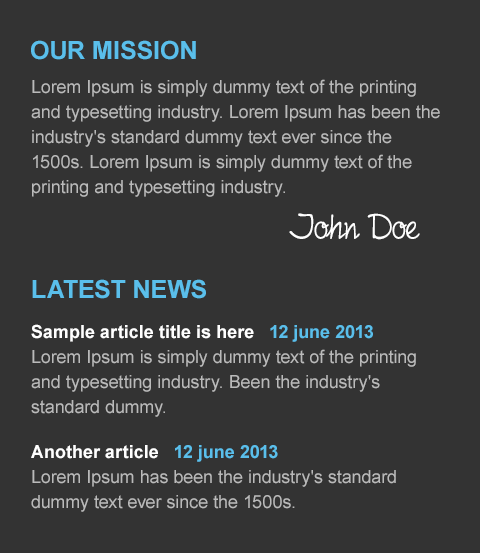
<style>
.page{position:relative;width:480px;height:553px;background:#333333}
.page>*{position:absolute;margin:0}
.t1{font:25px "Arial-BoldMT";color:#5abfeb;text-transform:uppercase}
.t2{font:18px/25px "ArialMT";color:#bababa}
.t3{font:40px "FinelinerScript";color:#ffffff}
.t4{font:18px/20px "Arial-BoldMT";color:#ffffff}
.t5{font:18px/20px "Arial-BoldMT";color:#5abfeb}
.t6{font:18px/25px "Arial-BoldMT";color:#5abfeb}
.t7{font:18px/20px "ArialMT";color:#bababa}
.t8{font:18px/45px "Arial-BoldMT";color:#ffffff}
.t9{font:18px/35px "Arial-BoldMT";color:#ffffff}
</style>
<div class="page">
<p class="t1" style="left:31px;top:40px;width:165px;height:20px">OUR MISSION</p>
<p class="t2" style="left:31px;top:79px;width:409px;height:118px">Lorem Ipsum is simply dummy text of the printing and typesetting industry. Lorem Ipsum has been the industry's standard dummy text ever since the 1500s. Lorem Ipsum is simply dummy text of the printing and typesetting industry.</p>
<p class="t3" style="left:289px;top:213px;width:131px;height:27px">John Doe</p>
<p class="t1" style="left:32px;top:279px;width:174px;height:20px">Latest news</p>
<p class="t2" style="left:31px;top:324px;width:385px;height:188px"><span class="t4">Sample article title is here   </span><span class="t5">12 june 201</span><span class="t6">3<br></span>Lorem Ipsum is sim<span class="t7">ply </span>dummy text of the printing and typesetting industry. Been the industry's standard dummy.<br><span class="t8">Another ar</span><span class="t9">ticle   </span><span class="t5">12 june 201</span><span class="t6">3<br></span>Lorem<span class="t7"> Ipsum has b</span>een the industry's standard dummy text ever since the 1500s.</p>
</div>
